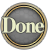
<style>
.page{position:relative;width:48px;height:50px;background:#ffffff}
.page>*{position:absolute;margin:0}
.t1{font:20px "RyuminPro-ExHeavy";letter-spacing:-0.08em;color:#eaedc8}
</style>
<div class="page">
<p class="t1" style="left:2px;top:17px;width:42px;height:16px">Done</p>
</div>
